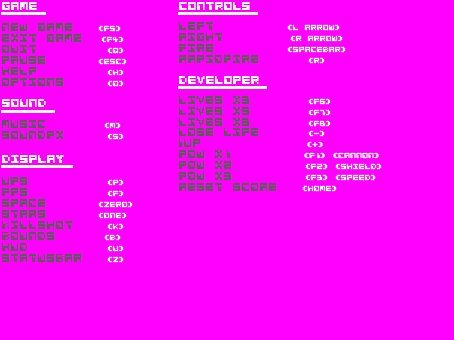
<style>
.page{position:relative;width:454px;height:340px;background:#ff00ff}
.page>*{position:absolute;margin:0}
.t1{font:12px "CosmicAlien";color:#ffffff}
.t2{font:12px "CosmicAlien";color:#5e5a5a}
.t3{font:8px "CosmicAlien";color:#fefefe}
.t4{font:8px "CosmicAlien";color:#ffffff}
.t5{font:8px "CosmicAlien";color:#fffefe}
</style>
<div class="page">
<p class="t1" style="left:2px;top:2px;width:35px;height:8px">GAME</p>
<p class="t1" style="left:179px;top:2px;width:71px;height:8px">controls</p>
<p class="t2" style="left:2px;top:23px;width:119px;height:9px">NEW GAME    <span class="t3">(F5)</span></p>
<p class="t4" style="left:179px;top:22px;width:161px;height:9px"><span class="t2"> left        </span>(l aRROW)</p>
<p class="t2" style="left:2px;top:34px;width:122px;height:9px">EXIT GAME   <span class="t4">(F4)</span></p>
<p class="t5" style="left:179px;top:33px;width:164px;height:9px"><span class="t2">  RIGHT      </span>  (r aRROW)</p>
<p class="t2" style="left:2px;top:45px;width:122px;height:9px">QUIT        <span class="t4">(Q)</span></p>
<p class="t4" style="left:179px;top:44px;width:167px;height:9px"><span class="t2"> FIRE        </span>(SPACEBAR)</p>
<p class="t2" style="left:2px;top:56px;width:125px;height:9px">PAUSE     <span class="t4"> (ESC)</span></p>
<p class="t2" style="left:179px;top:55px;width:146px;height:9px">RAPIDFIRE       <span class="t5">(R)</span></p>
<p class="t2" style="left:2px;top:67px;width:122px;height:9px">HELP        <span class="t4">(H)</span></p>
<p class="t2" style="left:2px;top:78px;width:122px;height:9px">OPTIONS      <span class="t4">(O)</span></p>
<p class="t1" style="left:179px;top:76px;width:80px;height:8px">developer</p>
<p class="t1" style="left:2px;top:99px;width:44px;height:8px">sound</p>
<p class="t2" style="left:179px;top:96px;width:152px;height:9px">LIVES x3   <span class="t3">     (F6)</span></p>
<p class="t2" style="left:179px;top:107px;width:152px;height:9px">LIVES x5   <span class="t3">     (F7)</span></p>
<p class="t2" style="left:2px;top:120px;width:119px;height:9px">MUSIC       <span class="t4">(M)</span></p>
<p class="t2" style="left:179px;top:118px;width:152px;height:9px">LIVES x8   <span class="t3">     (F8)</span></p>
<p class="t2" style="left:2px;top:131px;width:122px;height:9px">SOUNDFX      <span class="t4">(S)</span></p>
<p class="t2" style="left:179px;top:128px;width:146px;height:9px">LOSE LIFE       <span class="t3">(-)</span></p>
<p class="t5" style="left:179px;top:150px;width:200px;height:9px"><span class="t2">POW x1        </span>(F1) (Cannon)</p>
<p class="t2" style="left:179px;top:139px;width:144px;height:9px">1UP            <span class="t4">(+)</span></p>
<p class="t1" style="left:2px;top:155px;width:62px;height:8px">display</p>
<p class="t5" style="left:179px;top:161px;width:203px;height:9px"><span class="t2">POW x2        </span>(F2) (Shield)</p>
<p class="t5" style="left:179px;top:172px;width:197px;height:9px"><span class="t2">POW x3        </span>(F3) (Speed)</p>
<p class="t2" style="left:2px;top:177px;width:122px;height:9px">UPS         <span class="t4">(p)</span></p>
<p class="t2" style="left:179px;top:183px;width:158px;height:9px">RESET SCORE<span class="t4">    (HOME)</span></p>
<p class="t2" style="left:2px;top:188px;width:122px;height:9px">FPS         <span class="t4">(F)</span></p>
<p class="t4" style="left:2px;top:199px;width:131px;height:9px"><span class="t2">SPACE      </span>(ZERO)</p>
<p class="t2" style="left:2px;top:210px;width:125px;height:9px">STARS      <span class="t4">(ONE)</span></p>
<p class="t2" style="left:2px;top:221px;width:122px;height:9px">KILLSHOT     <span class="t3">(K)</span></p>
<p class="t2" style="left:2px;top:232px;width:119px;height:9px">BOUNDS      <span class="t5">(B)</span></p>
<p class="t2" style="left:2px;top:243px;width:122px;height:9px">HUD         <span class="t4">(U)</span></p>
<p class="t2" style="left:2px;top:254px;width:122px;height:9px">STATUSBAr    <span class="t4">(Z)</span></p>
</div>
